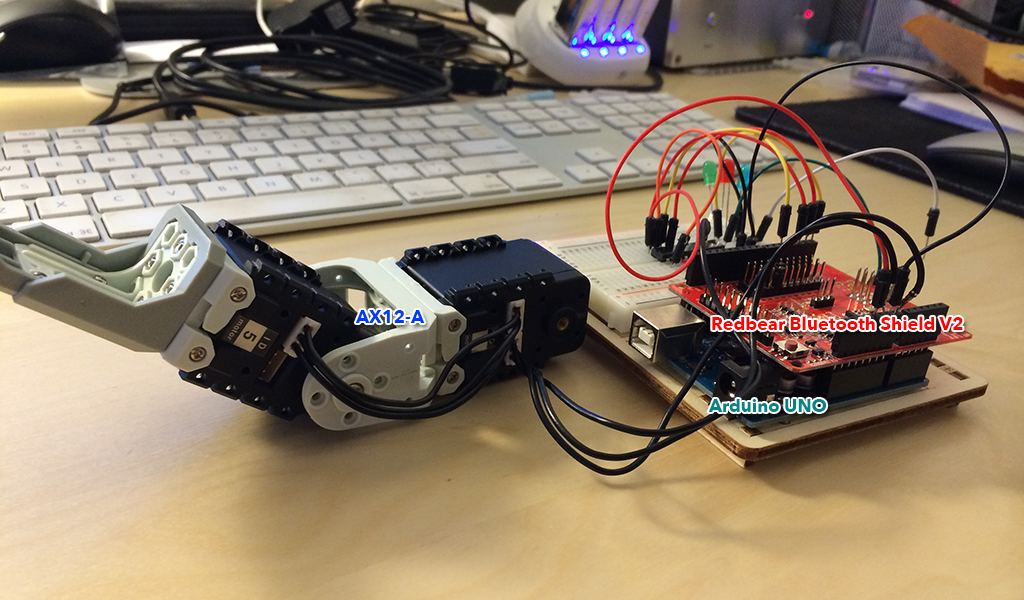
<style>
.page{position:relative;width:1024px;height:600px}
.page>*{position:absolute;margin:0}
.t1{font:18px "AvenirNext-Bold";color:#003cff}
.t2{font:18px "AvenirNext-Bold";color:#fe0202}
.t3{font:18px "AvenirNext-Bold";color:#038585}
</style>
<div class="page">
<p class="t1" style="left:355px;top:310px;width:70px;height:13px">AX12-A</p>
<p class="t2" style="left:712px;top:316px;width:251px;height:14px">Redbear Bluetooth Shield V2</p>
<p class="t3" style="left:708px;top:399px;width:119px;height:13px">Arduino UNO</p>
</div>
